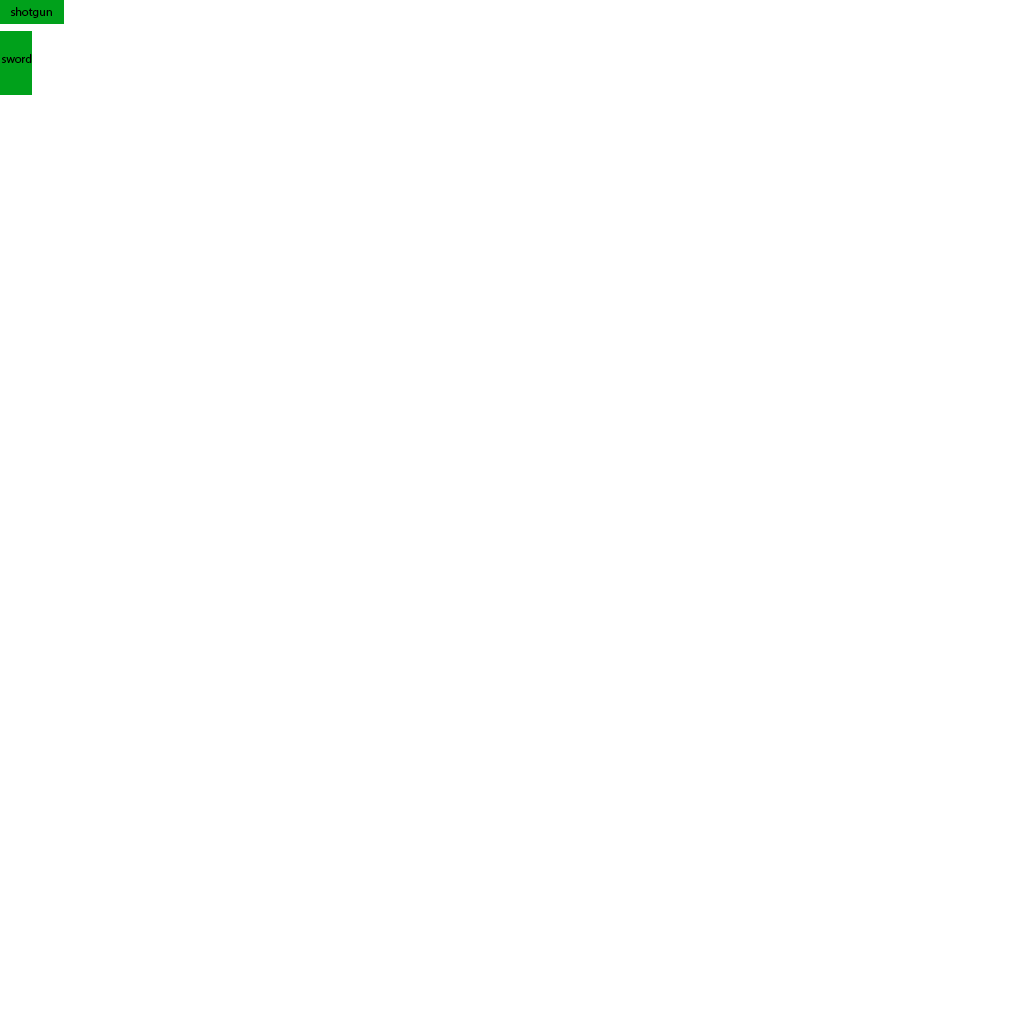
<style>
.page{position:relative;width:1024px;height:1024px;background:#ffffff}
.page>*{position:absolute;margin:0}
.t1{font:12px "MyriadPro-Regular";color:#000000}
</style>
<div class="page">
<p class="t1" style="left:10px;top:7px;width:42px;height:11px">shotgun</p>
<p class="t1" style="left:1px;top:54px;width:31px;height:9px">sword</p>
</div>
